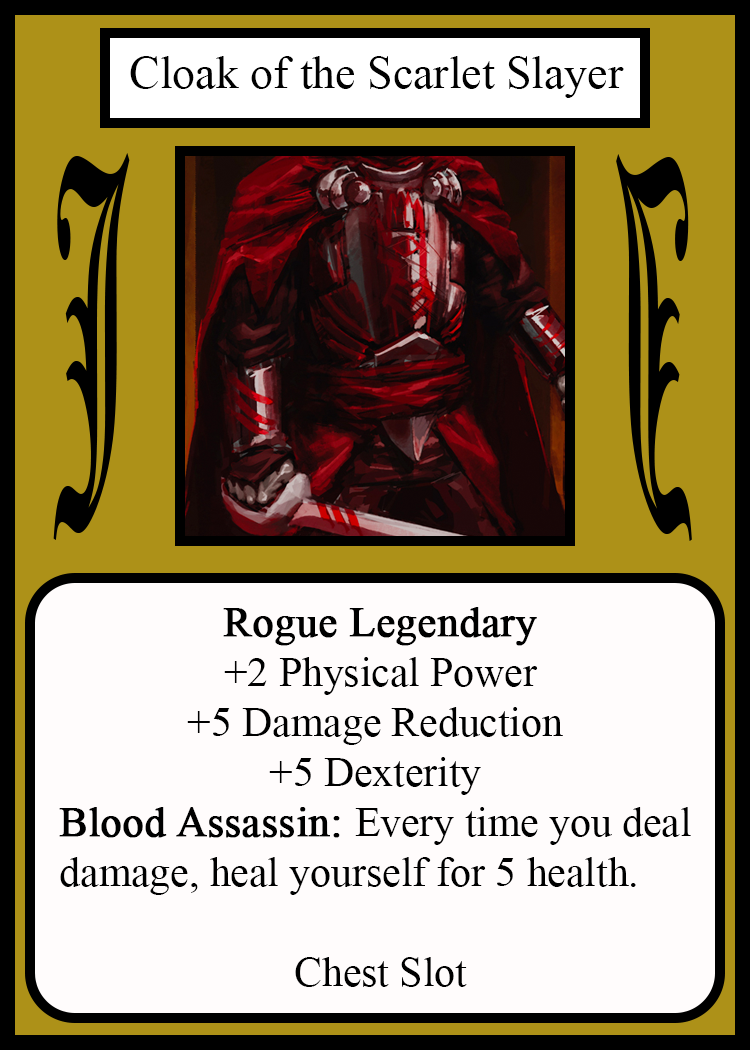
<style>
.page{position:relative;width:750px;height:1050px;background:#fffcfc}
.page>*{position:absolute;margin:0}
.t1{font:45.8px "TimesNewRomanPSMT";color:#010101}
.t2{font:450.1px "OldEnglishTextMT";color:#000000;scale:0.26 1}
.t3{font:449.7px "OldEnglishTextMT";color:#000000;scale:0.26 1}
.t4{font:41.7px "TimesNewRomanPSMT";color:#000000}
.t5{font:41.7px "TimesNewRomanPSMT";color:#000000;font-weight:bold}
</style>
<div class="page">
<p class="t1" style="left:130px;top:56px;width:494px;height:42px">Cloak of the Scarlet Slayer</p>
<p class="t2" style="left:53px;top:153px;width:77px;height:387px">J</p>
<p class="t3" style="left:616px;top:154px;width:76px;height:387px;rotate:180deg">J</p>
<p class="t4" style="left:59px;top:607px;width:632px;height:380px;text-align:center"><span class="t5">Rogue Legendary<br></span> +2 Physical Power<br>+5 Damage Reduction<br>+5 Dexterity<br><span class="t5">Blood Assassin: </span>Every time you deal<br>damage, heal yourself for 5 health.     <br><br> Chest Slot</p>
</div>
